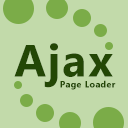
<style>
.page{position:relative;width:128px;height:128px;background:#c2daaa}
.page>*{position:absolute;margin:0}
.t1{font:45px "Gadugi-Bold";letter-spacing:0.04em;color:#234705}
.t2{font:9px "Gadugi-Bold";letter-spacing:0.04em;color:#234705}
</style>
<div class="page">
<p class="t1" style="left:14px;top:43px;width:99px;height:45px">Ajax</p>
<p class="t2" style="left:60px;top:80px;width:56px;height:10px">Page Loader</p>
</div>
